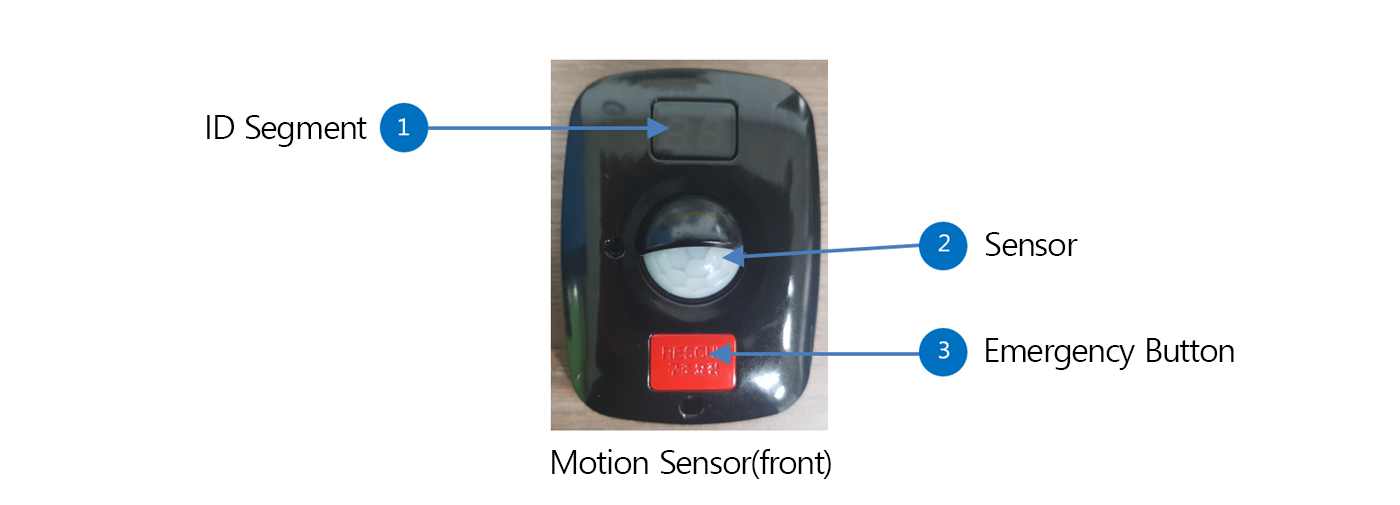
<style>
.page{position:relative;width:1400px;height:505px;background:#ffffff}
.page>*{position:absolute;margin:0}
.t1{font:33.3px "MalgunGothic";letter-spacing:-0.05em;color:#000000}
</style>
<div class="page">
<p class="t1" style="left:207px;top:115px;width:160px;height:32px">ID Segment</p>
<p class="t1" style="left:986px;top:232px;width:92px;height:24px">Sensor</p>
<p class="t1" style="left:986px;top:338px;width:248px;height:32px">Emergency Button</p>
<p class="t1" style="left:552px;top:449px;width:279px;height:30px">Motion Sensor(front)</p>
</div>
